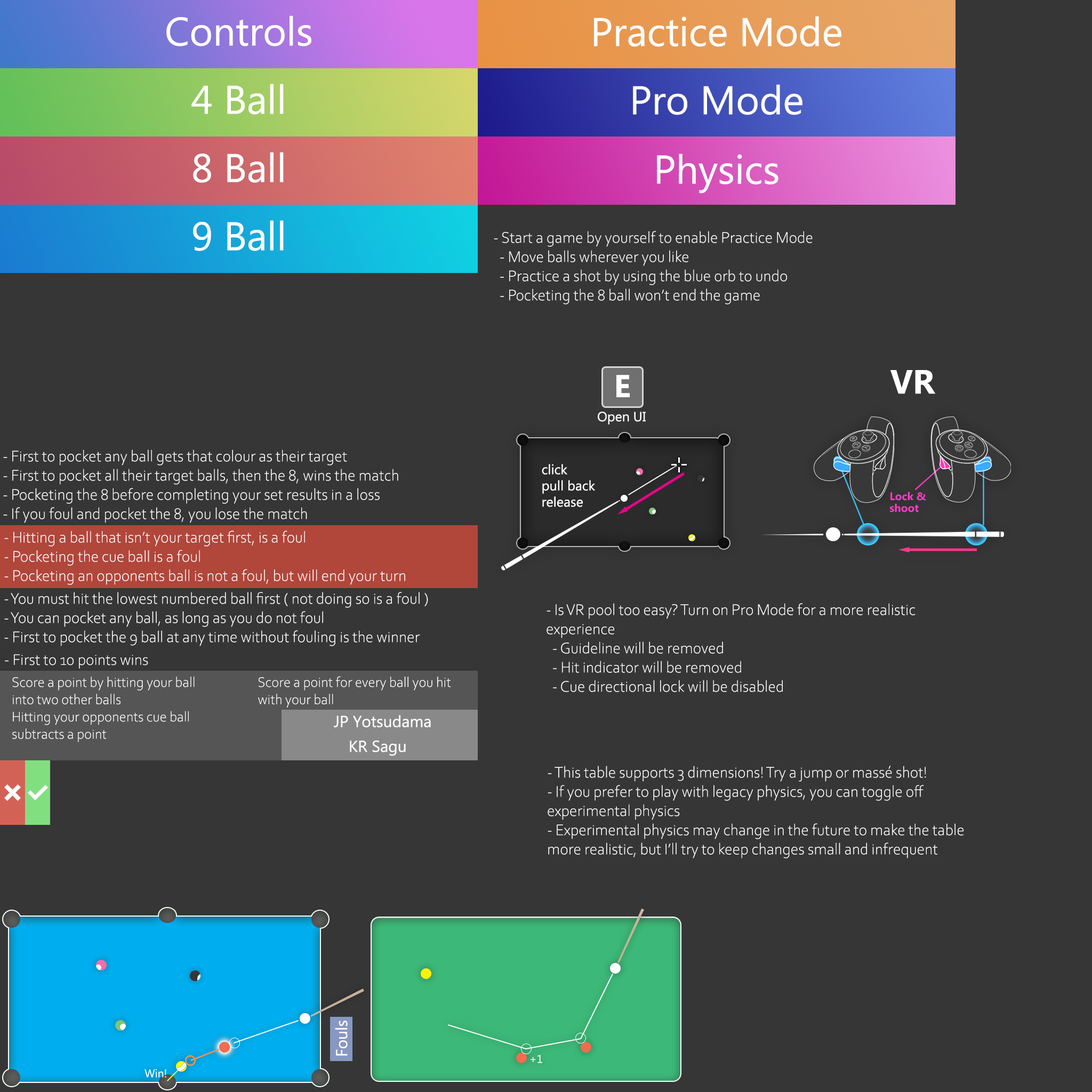
<style>
.page{position:relative;width:1092px;height:1092px;background:#363636}
.page>*{position:absolute;margin:0}
.t1{font:40px "MicrosoftTaiLe";color:#ffffff}
.t2{font:16px "CorbelLight";color:#ffffff}
.t3{font:31.5px "MicrosoftTaiLe-Bold";color:#ffffff}
.t4{font:33.6px "MicrosoftTaiLe-Bold";color:#ffffff}
.t5{font:13.3px "MicrosoftTaiLe";color:#ffffff}
.t6{font:13.5px "MicrosoftTaiLe";color:#ffffff}
.t7{font:11px/3.8px "Ebrima-Bold";color:#ff3bc6}
.t8{font:14.4px "CorbelLight";color:#fefffe}
.t9{font:16px "MicrosoftTaiLe";color:#ffffff}
.t10{font:11px "MicrosoftTaiLe";color:#ffffff}
.t11{font:11.1px "MicrosoftTaiLe";color:#ffffff}
</style>
<div class="page">
<p class="t1" style="left:166px;top:15px;width:145px;height:31px">Controls</p>
<p class="t1" style="left:594px;top:16px;width:247px;height:31px">Practice Mode</p>
<p class="t1" style="left:191px;top:84px;width:93px;height:31px">4 Ball</p>
<p class="t1" style="left:633px;top:84px;width:169px;height:31px">Pro Mode</p>
<p class="t1" style="left:193px;top:152px;width:91px;height:31px">8 Ball</p>
<p class="t1" style="left:657px;top:154px;width:121px;height:40px">Physics</p>
<p class="t1" style="left:193px;top:220px;width:91px;height:31px">9 Ball</p>
<p class="t2" style="left:494px;top:231px;width:319px;height:73px">- Start a game by yourself to enable Practice Mode<br>  - Move balls wherever you like<br>  - Practice a shot by using the blue orb to undo<br>  - Pocketing the 8 ball won’t end the game</p>
<p class="t3" style="left:616px;top:375px;width:14px;height:22px">E</p>
<p class="t4" style="left:890px;top:370px;width:45px;height:24px">VR</p>
<p class="t5" style="left:598px;top:412px;width:48px;height:12px">Open UI</p>
<p class="t2" style="left:3px;top:449px;width:395px;height:74px">- First to pocket any ball gets that colour as their target<br>- First to pocket all their target balls, then the 8, wins the match<br>- Pocketing the 8 before completing your set results in a loss<br>- If you foul and pocket the 8, you lose the match</p>
<p class="t6" style="left:542px;top:464px;width:53px;height:43px">click<br>pull back<br>release</p>
<p class="t7" style="left:890px;top:492px;width:36px;height:20px">Lock &amp; <br><br><br>shoot</p>
<p class="t2" style="left:4px;top:531px;width:401px;height:54px">- Hitting a ball that isn’t your target first, is a foul<br>- Pocketing the cue ball is a foul<br>- Pocketing an opponents ball is not a foul, but will end your turn</p>
<p class="t2" style="left:4px;top:592px;width:424px;height:54px">- You must hit the lowest numbered ball first ( not doing so is a foul )<br>- You can pocket any ball, as long as you do not foul<br>- First to pocket the 9 ball at any time without fouling is the winner</p>
<p class="t2" style="left:547px;top:603px;width:368px;height:89px">- Is VR pool too easy? Turn on Pro Mode for a more realistic<br>experience<br>  - Guideline will be removed<br>  - Hit indicator will be removed<br>  - Cue directional lock will be disabled</p>
<p class="t2" style="left:5px;top:654px;width:143px;height:15px">- First to 10 points wins</p>
<p class="t8" style="left:12px;top:677px;width:183px;height:65px">Score a point by hitting your ball into two other balls <br>Hitting your opponents cue ball subtracts a point</p>
<p class="t8" style="left:258px;top:676px;width:193px;height:32px">Score a point for every ball you hit with your ball</p>
<p class="t9" style="left:334px;top:715px;width:97px;height:12px">JP Yotsudama</p>
<p class="t9" style="left:350px;top:740px;width:56px;height:16px">KR Sagu</p>
<p class="t2" style="left:548px;top:766px;width:415px;height:92px">- This table supports 3 dimensions! Try a jump or massé shot!<br>- If you prefer to play with legacy physics, you can toggle off<br>experimental physics<br>- Experimental physics may change in the future to make the table<br>more realistic, but I’ll try to keep changes small and infrequent</p>
<p class="t9" style="left:335px;top:1021px;width:13px;height:35px;rotate:-90deg">Fouls</p>
<p class="t10" style="left:531px;top:1055px;width:11px;height:8px">+1</p>
<p class="t11" style="left:144px;top:1069px;width:22px;height:9px">Win!</p>
</div>
